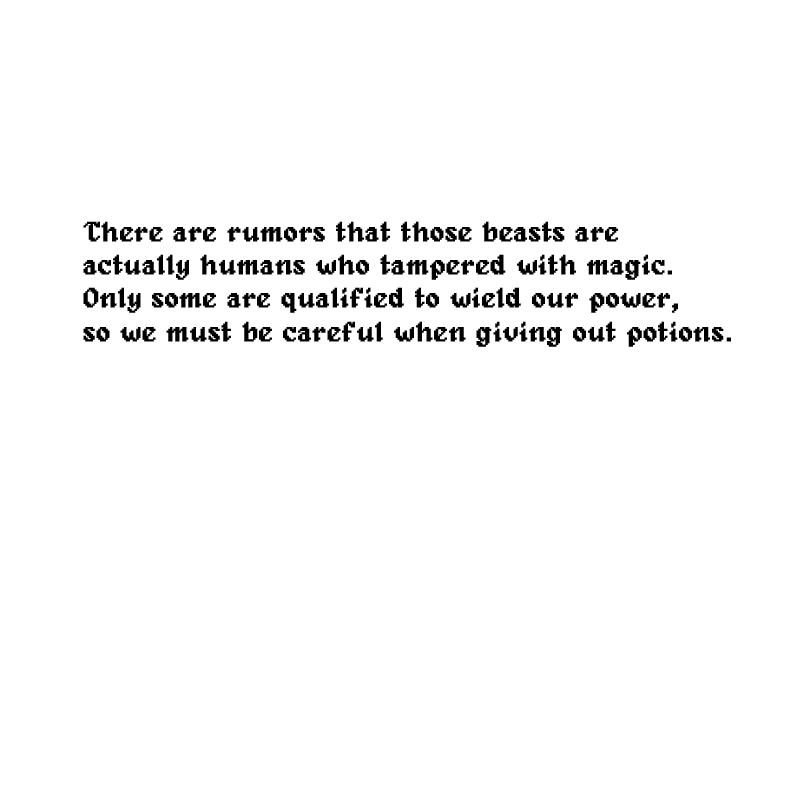
<style>
.page{position:relative;width:800px;height:800px;background:#ffffff}
.page>*{position:absolute;margin:0}
.t1{font:27.9px "Alagard";color:#000000;font-weight:bold}
</style>
<div class="page">
<p class="t1" style="left:83px;top:221px;width:648px;height:126px">There are rumors that those beasts are<br>actually humans who tampered with magic.<br>Only some are qualified to wield our power, <br>so we must be careful when giving out potions.</p>
</div>
